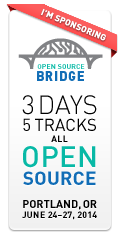
<style>
.page{position:relative;width:120px;height:240px;background:#ffffff}
.page>*{position:absolute;margin:0}
.t1{font:7px "DINPro-Bold";letter-spacing:0.02em;color:#08b9a6}
.t2{font:13px "DINPro-Black";letter-spacing:0.06em;color:#116db6}
.t3{font:13px "DINPro-Black";letter-spacing:0.02em;color:#116db6}
.t4{font:13px "DINPro-Black";letter-spacing:0.03em;color:#116db6}
.t5{font:17px/17px "DINPro-Regular";color:#000000}
.t6{font:26px/10px "DINPro-Light";color:#000000}
.t7{font:9px/11px "DINPro-Bold";letter-spacing:0.02em;color:#000000}
.t8{font:29px/25px "DINPro-Medium";letter-spacing:0.02em;color:#08b9a6}
.t9{font:19px/18px "DINPro-Bold";letter-spacing:0.02em;color:#116db6}
.t10{font:9px/10px "DIN-Bold";letter-spacing:0.02em;color:#000000}
.t11{font:11px/10px "DIN-Bold";color:#000000}
</style>
<div class="page">
<p class="t1" style="left:37px;top:64px;width:48px;height:5px">OPEN SOURCE</p>
<p class="t2" style="left:37px;top:71px;width:47px;height:10px"><span class="t3">B</span>RI<span class="t4">D</span><span class="t3">GE</span></p>
<p class="t5" style="left:22px;top:95px;width:75px;height:90px;text-align:center"><span class="t6">3 DAYS<br></span>5 TRACKS<br><span class="t7">ALL<br></span><span class="t8">OPEN<br></span><span class="t9">SOURCE</span></p>
<p class="t10" style="left:22px;top:200px;width:75px;height:20px;text-align:center"><span class="t11">PORTLAND, OR<br></span>JUNE 24–27, 2014</p>
</div>
